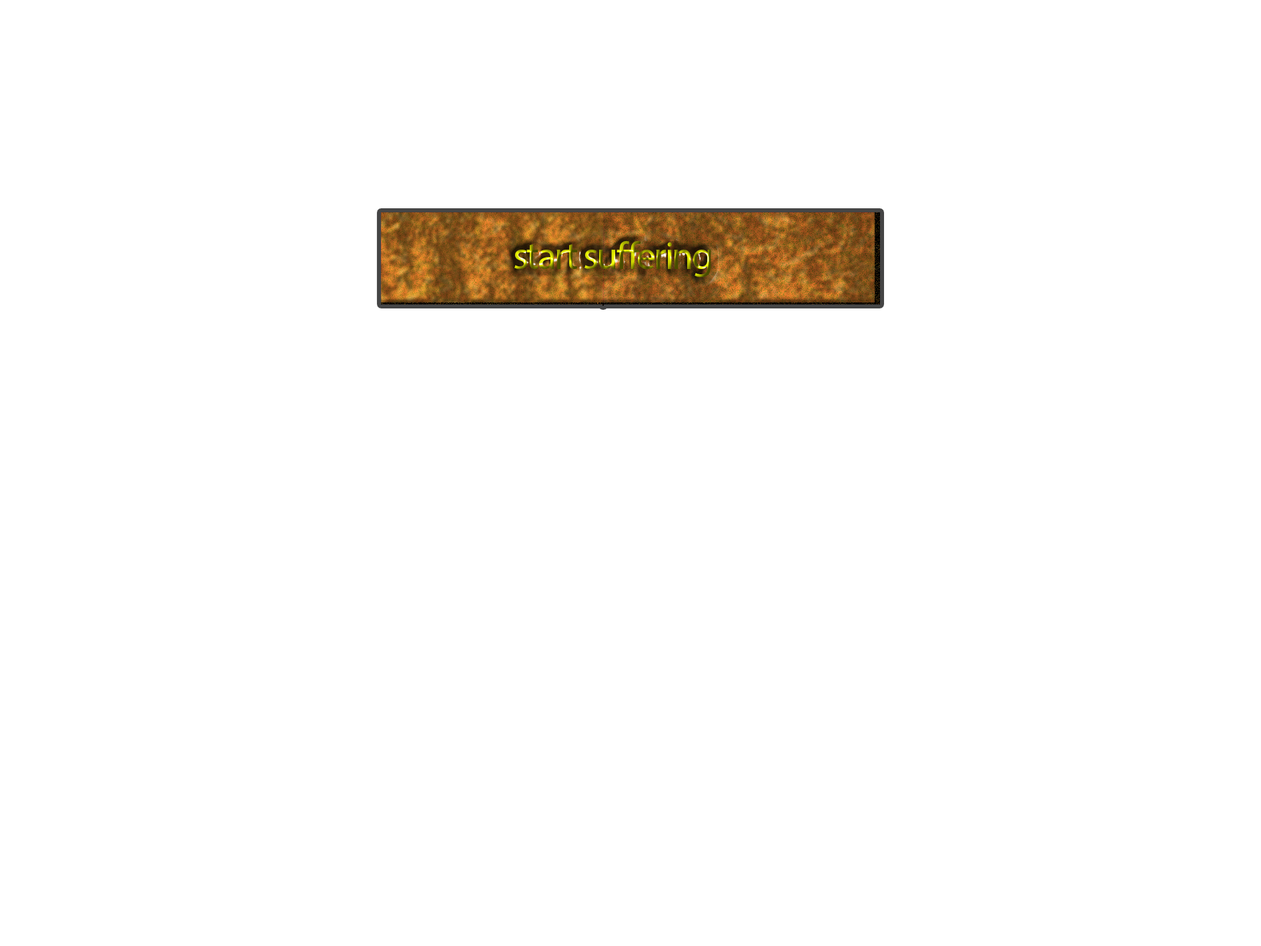
<style>
.page{position:relative;width:1261px;height:946px;background:#ffffff}
.page>*{position:absolute;margin:0}
.t1{font:38.9px "MyriadPro-Regular";letter-spacing:-0.05em}
</style>
<div class="page">
<p class="t1" style="left:514px;top:241px;width:197px;height:36px">start suffering</p>
</div>
